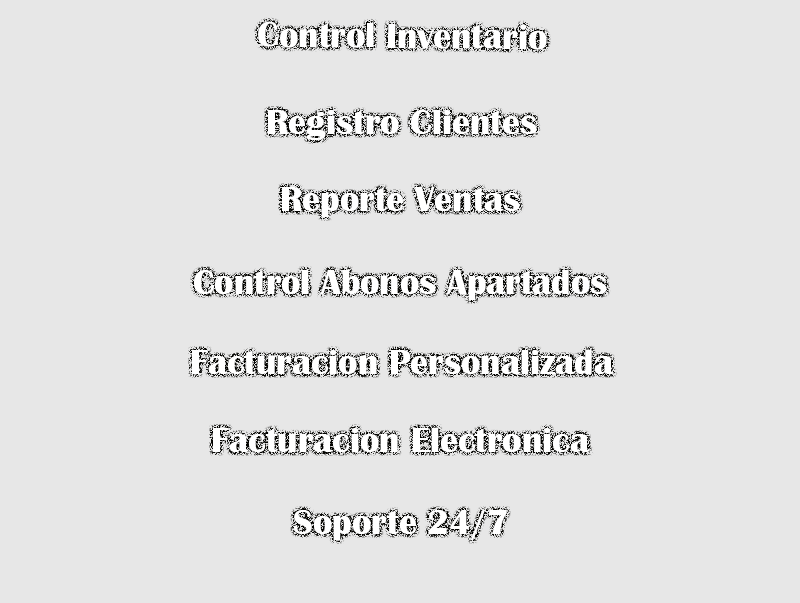
<style>
.page{position:relative;width:800px;height:603px;background:#e7e7e7}
.page>*{position:absolute;margin:0}
.t1{font:36px "BritannicBold";color:#ffffff}
</style>
<div class="page">
<p class="t1" style="left:258px;top:21px;width:289px;height:29px;rotate:1deg">Control Inventario</p>
<p class="t1" style="left:268px;top:109px;width:269px;height:31px">Registro Clientes</p>
<p class="t1" style="left:282px;top:187px;width:238px;height:30px">Reporte Ventas</p>
<p class="t1" style="left:194px;top:269px;width:413px;height:31px">Control Abonos Apartados</p>
<p class="t1" style="left:192px;top:349px;width:422px;height:25px">Facturacion Personalizada</p>
<p class="t1" style="left:213px;top:427px;width:377px;height:25px">Facturacion Electronica</p>
<p class="t1" style="left:294px;top:510px;width:213px;height:30px">Soporte 24/7</p>
</div>
